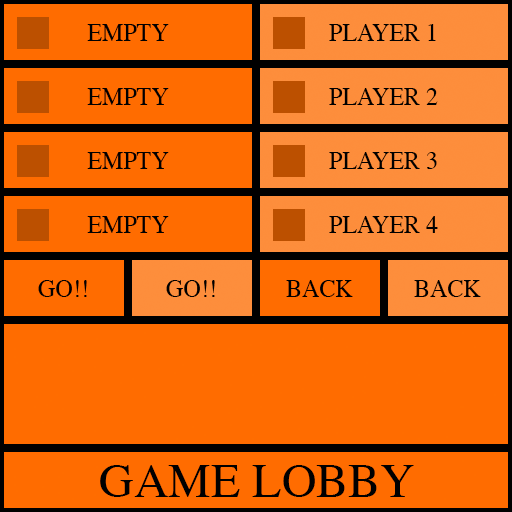
<style>
.page{position:relative;width:512px;height:512px;background:#ff6c00}
.page>*{position:absolute;margin:0}
.t1{font:24px "Times-Roman";color:#000000}
.t2{font:48px "Times-Roman";color:#000000}
</style>
<div class="page">
<p class="t1" style="left:87px;top:24px;width:82px;height:17px">EMPTY</p>
<p class="t1" style="left:329px;top:24px;width:107px;height:17px">PLAYER 1</p>
<p class="t1" style="left:87px;top:88px;width:82px;height:17px">EMPTY</p>
<p class="t1" style="left:329px;top:88px;width:109px;height:17px">PLAYER 2</p>
<p class="t1" style="left:87px;top:152px;width:82px;height:17px">EMPTY</p>
<p class="t1" style="left:329px;top:152px;width:108px;height:17px">PLAYER 3</p>
<p class="t1" style="left:87px;top:216px;width:82px;height:17px">EMPTY</p>
<p class="t1" style="left:329px;top:216px;width:109px;height:17px">PLAYER 4</p>
<p class="t1" style="left:38px;top:280px;width:49px;height:17px">GO!!</p>
<p class="t1" style="left:166px;top:280px;width:49px;height:17px">GO!!</p>
<p class="t1" style="left:286px;top:280px;width:67px;height:17px">BACK</p>
<p class="t1" style="left:414px;top:280px;width:67px;height:17px">BACK</p>
<p class="t2" style="left:100px;top:465px;width:314px;height:32px">GAME LOBBY</p>
</div>
